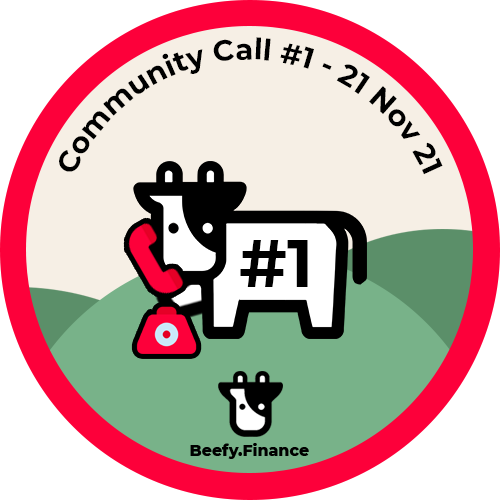
<style>
.page{position:relative;width:500px;height:500px;background:#ffffff}
.page>*{position:absolute;margin:0}
.t1{font:29.2px "Montserrat-Bold";color:#000000}
.t2{font:66.7px "Montserrat-Bold";color:#000000}
</style>
<div class="page">
<p class="t1" style="left:59px;top:37px;width:384px;height:138px;text-align:center">Community Call #1 - 21 Nov 21</p>
<p class="t2" style="left:240px;top:240px;width:68px;height:47px">#1</p>
</div>
